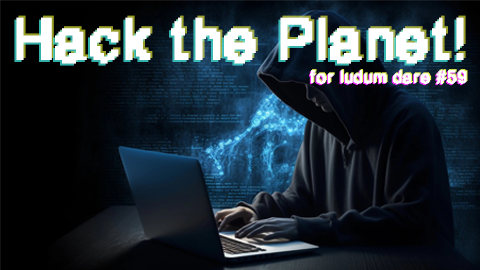
<style>
.page{position:relative;width:480px;height:270px}
.page>*{position:absolute;margin:0}
.t1{font:56.4px "PixelGrunge";color:#ffffff}
.t2{font:17px "PixelGrunge"}
.t3{font:17px "PixelGrunge";color:#ffffff}
</style>
<div class="page">
<p class="t1" style="left:16px;top:17px;width:448px;height:47px">Hack the Planet!</p>
<p class="t1" style="left:18px;top:15px;width:448px;height:47px">Hack the Planet!</p>
<p class="t1" style="left:14px;top:19px;width:448px;height:47px">Hack the Planet!</p>
<p class="t2" style="left:309px;top:71px;width:157px;height:15px">for ludum dare #59</p>
<p class="t3" style="left:310px;top:70px;width:157px;height:15px">for ludum dare #59</p>
<p class="t2" style="left:311px;top:69px;width:157px;height:15px">for ludum dare #59</p>
</div>
